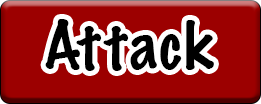
<style>
.page{position:relative;width:261px;height:104px;background:#9c0000}
.page>*{position:absolute;margin:0}
.t1{font:60px "MarkerFelt-Thin";color:#000000}
</style>
<div class="page">
<p class="t1" style="left:45px;top:19px;width:169px;height:52px">Attack</p>
</div>
